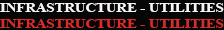
<style>
.page{position:relative;width:224px;height:30px;background:#060606}
.page>*{position:absolute;margin:0}
.t1{font:12px "TimesNewRomanPS-BoldMT";color:#f9f4f4;scale:1.22 1}
.t2{font:12px "TimesNewRomanPS-BoldMT";color:#d62c2c;scale:1.22 1}
</style>
<div class="page">
<p class="t1" style="left:0px;top:3px;width:224px;height:9px">INFRASTRUCTURE - UTILITIES</p>
<p class="t2" style="left:0px;top:19px;width:224px;height:9px">INFRASTRUCTURE - UTILITIES</p>
</div>
